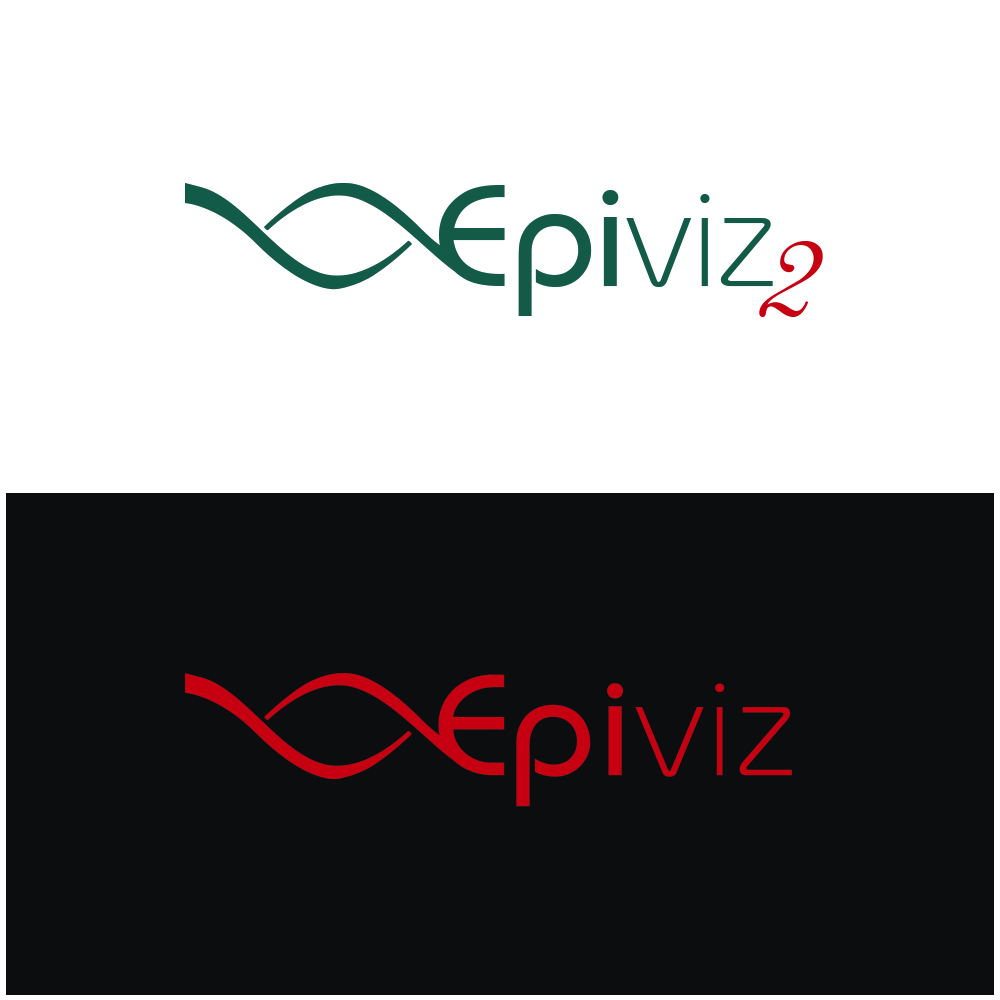
<style>
.page{position:relative;width:1000px;height:1000px;background:#ffffff}
.page>*{position:absolute;margin:0}
.t1{font:143.8px "BauhausITCbyBT-Medium";color:#135b47;scale:1.05 1}
.t2{font:143.8px "BauhausITCbyBT-Light";color:#135b47;scale:1.05 1}
.t3{font:166.7px "ARDECODE";color:#c70011}
</style>
<div class="page">
<p class="t1" style="left:439px;top:185px;width:334px;height:131px">Epi<span class="t2">viz</span></p>
<p class="t3" style="left:759px;top:241px;width:64px;height:76px">2</p>
</div>
